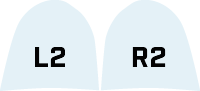
<style>
.page{position:relative;width:200px;height:91px;background:#e4f1f7}
.page>*{position:absolute;margin:0}
.t1{font:29px "Industry-Bold";color:#000000}
</style>
<div class="page">
<p class="t1" style="left:35px;top:47px;width:30px;height:20px">L2</p>
<p class="t1" style="left:132px;top:47px;width:34px;height:20px">R2</p>
</div>
